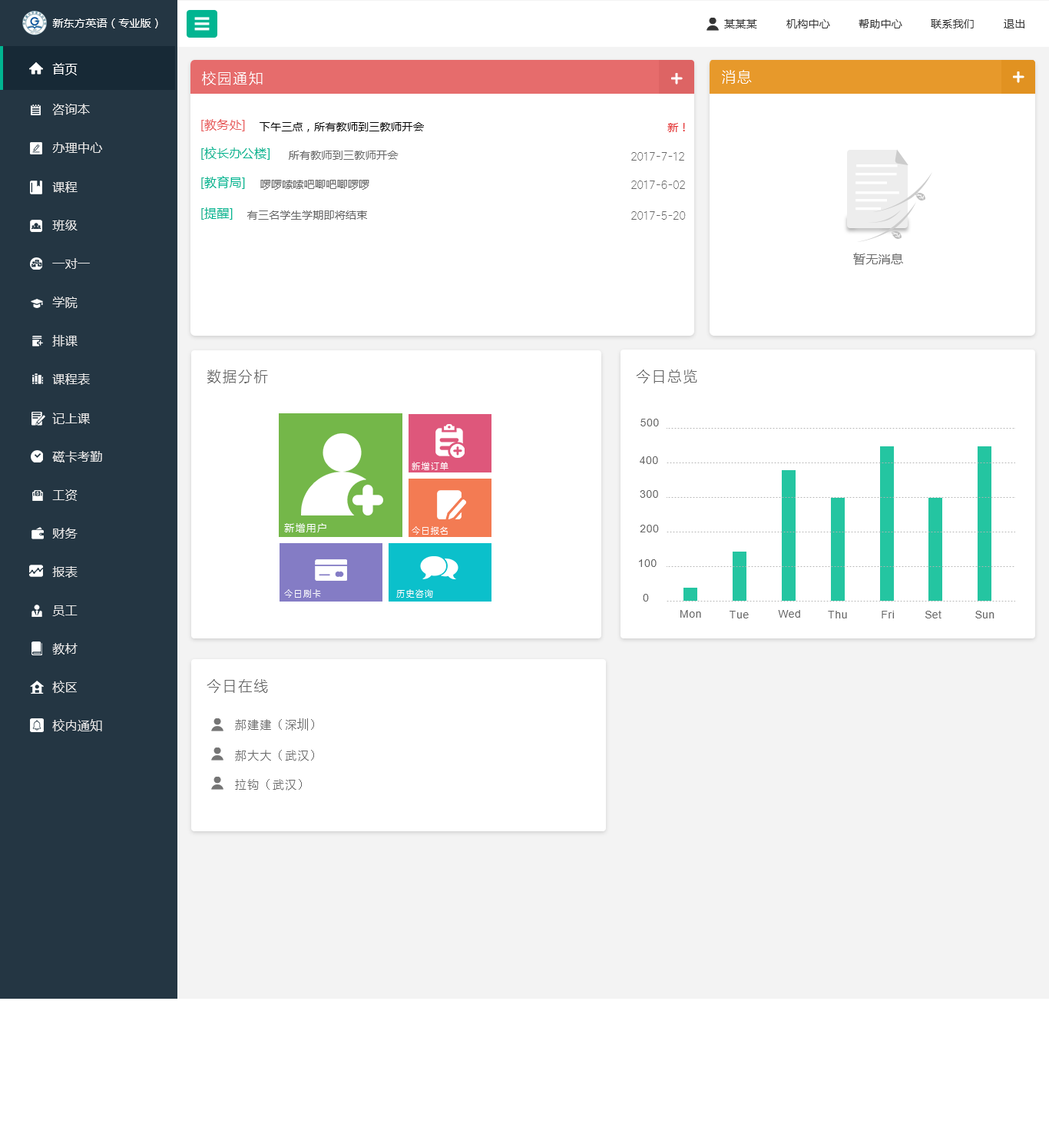
<style>
.page{position:relative;width:1049px;height:1137px;background:#ffffff}
.page>*{position:absolute;margin:0}
.t1{font:10.8px "MicrosoftYaHei";letter-spacing:0.02em;color:#ffffff}
.t2{font:10.8px "MicrosoftYaHei";letter-spacing:0.02em;color:#333333}
.t3{font:12.3px "MicrosoftYaHei";letter-spacing:0.02em;color:#ffffff}
.t4{font:15.4px "MI-LANTING--GBK1-Light";letter-spacing:0.02em;color:#ffffff}
.t5{font:12.3px "MicrosoftYaHei";letter-spacing:0.02em;color:#e5e5e5}
.t6{font:12.3px "MicrosoftYaHei";letter-spacing:0.02em;color:#e85d5d}
.t7{font:10.8px "MicrosoftYaHei";letter-spacing:0.02em;color:#000000}
.t8{font:10.8px "MicrosoftYaHei";letter-spacing:0.02em;color:#e42e2e}
.t9{font:12.3px "MicrosoftYaHei";letter-spacing:0.02em;color:#01b591}
.t10{font:10.8px "MicrosoftYaHei";letter-spacing:0.02em;color:#666666}
.t11{font:10.8px "MI-LANTING--GBK1-Light";letter-spacing:0.02em;color:#666666}
.t12{font:12.3px "MicrosoftYaHei";letter-spacing:0.02em;color:#6b6b6b}
.t13{font:15.4px "MI-LANTING--GBK1-Light";letter-spacing:0.02em;color:#666666}
.t14{font:10.8px "ArialMT";letter-spacing:0.02em;color:#666666}
.t15{font:9.2px "MI-LANTING--GBK1-Light";letter-spacing:0.02em;color:#ffffff}
.t16{font:10.8px "MI-LANTING--GBK1-Light";letter-spacing:0.02em;color:#ffffff}
.t17{font:12.3px "MI-LANTING--GBK1-Light";letter-spacing:0.02em;color:#666666}
.t18{font:12.3px "SimSun";letter-spacing:0.02em;color:#666666}
</style>
<div class="page">
<p class="t1" style="left:52px;top:18px;width:106px;height:10px">新东方英语（专业版）</p>
<p class="t2" style="left:724px;top:19px;width:33px;height:9px">某某某</p>
<p class="t2" style="left:786px;top:19px;width:44px;height:9px">机构中心</p>
<p class="t2" style="left:859px;top:19px;width:43px;height:9px">帮助中心</p>
<p class="t2" style="left:931px;top:19px;width:43px;height:9px">联系我们</p>
<p class="t2" style="left:1004px;top:19px;width:21px;height:9px">退出</p>
<p class="t3" style="left:52px;top:63px;width:26px;height:12px">首页</p>
<p class="t4" style="left:202px;top:71px;width:61px;height:14px">校园通知</p>
<p class="t4" style="left:722px;top:70px;width:30px;height:14px">消息</p>
<p class="t5" style="left:52px;top:104px;width:38px;height:11px">咨询本</p>
<p class="t6" style="left:201px;top:119px;width:44px;height:12px">[教务处]</p>
<p class="t7" style="left:260px;top:122px;width:164px;height:10px">下午三点，所有教师到三教师开会</p>
<p class="t8" style="left:667px;top:123px;width:18px;height:9px">新！</p>
<p class="t5" style="left:52px;top:142px;width:50px;height:12px">办理中心</p>
<p class="t9" style="left:201px;top:147px;width:69px;height:13px">[校长办公楼]</p>
<p class="t10" style="left:289px;top:151px;width:110px;height:9px">所有教师到三教师开会</p>
<p class="t11" style="left:631px;top:152px;width:53px;height:9px">2017-7-12</p>
<p class="t5" style="left:52px;top:181px;width:26px;height:12px">课程</p>
<p class="t9" style="left:201px;top:176px;width:44px;height:13px">[教育局]</p>
<p class="t10" style="left:260px;top:180px;width:109px;height:10px">啰啰嗦嗦吧唧吧唧啰啰</p>
<p class="t11" style="left:631px;top:180px;width:54px;height:9px">2017-6-02</p>
<p class="t9" style="left:201px;top:207px;width:32px;height:13px">[提醒]</p>
<p class="t5" style="left:52px;top:220px;width:26px;height:11px">班级</p>
<p class="t10" style="left:247px;top:210px;width:120px;height:10px">有三名学生学期即将结束</p>
<p class="t11" style="left:631px;top:211px;width:55px;height:9px">2017-5-20</p>
<p class="t12" style="left:853px;top:253px;width:50px;height:12px">暂无消息</p>
<p class="t5" style="left:52px;top:258px;width:38px;height:11px">一对一</p>
<p class="t5" style="left:52px;top:296px;width:26px;height:12px">学院</p>
<p class="t5" style="left:52px;top:335px;width:26px;height:11px">排课</p>
<p class="t5" style="left:52px;top:373px;width:38px;height:12px">课程表</p>
<p class="t13" style="left:207px;top:369px;width:61px;height:14px">数据分析</p>
<p class="t13" style="left:636px;top:369px;width:61px;height:14px">今日总览</p>
<p class="t5" style="left:52px;top:412px;width:38px;height:12px">记上课</p>
<p class="t14" style="left:641px;top:419px;width:18px;height:7px">500</p>
<p class="t5" style="left:52px;top:451px;width:50px;height:11px">磁卡考勤</p>
<p class="t15" style="left:412px;top:462px;width:37px;height:8px">新增订单</p>
<p class="t14" style="left:640px;top:456px;width:18px;height:8px">400</p>
<p class="t5" style="left:52px;top:489px;width:26px;height:12px">工资</p>
<p class="t14" style="left:640px;top:490px;width:18px;height:8px">300</p>
<p class="t5" style="left:52px;top:528px;width:26px;height:10px">财务</p>
<p class="t16" style="left:284px;top:523px;width:42px;height:9px">新增用户</p>
<p class="t15" style="left:412px;top:526px;width:36px;height:9px">今日报名</p>
<p class="t14" style="left:640px;top:525px;width:19px;height:7px">200</p>
<p class="t5" style="left:52px;top:566px;width:26px;height:12px">报表</p>
<p class="t14" style="left:639px;top:559px;width:18px;height:8px">100</p>
<p class="t15" style="left:284px;top:589px;width:37px;height:9px">今日刷卡</p>
<p class="t15" style="left:396px;top:589px;width:37px;height:9px">历史咨询</p>
<p class="t14" style="left:643px;top:594px;width:6px;height:7px">0</p>
<p class="t5" style="left:52px;top:605px;width:26px;height:11px">员工</p>
<p class="t14" style="left:680px;top:610px;width:21px;height:7px">Mon</p>
<p class="t14" style="left:730px;top:611px;width:19px;height:7px">Tue</p>
<p class="t14" style="left:778px;top:610px;width:22px;height:7px">Wed</p>
<p class="t14" style="left:828px;top:611px;width:19px;height:7px">Thu</p>
<p class="t14" style="left:882px;top:611px;width:12px;height:7px">Fri</p>
<p class="t14" style="left:925px;top:611px;width:17px;height:7px">Set</p>
<p class="t14" style="left:975px;top:611px;width:20px;height:7px">Sun</p>
<p class="t5" style="left:52px;top:643px;width:26px;height:11px">教材</p>
<p class="t5" style="left:52px;top:680px;width:25px;height:13px">校区</p>
<p class="t13" style="left:207px;top:679px;width:61px;height:14px">今日在线</p>
<p class="t5" style="left:52px;top:719px;width:50px;height:12px">校内通知</p>
<p class="t17" style="left:235px;top:718px;width:79px;height:12px">郝建建<span class="t18">（</span>深<span class="t18">圳）</span></p>
<p class="t17" style="left:235px;top:750px;width:79px;height:11px">郝大大<span class="t18">（</span>武汉<span class="t18">）</span></p>
<p class="t17" style="left:235px;top:779px;width:67px;height:11px">拉钩<span class="t18">（</span>武汉<span class="t18">）</span></p>
</div>
